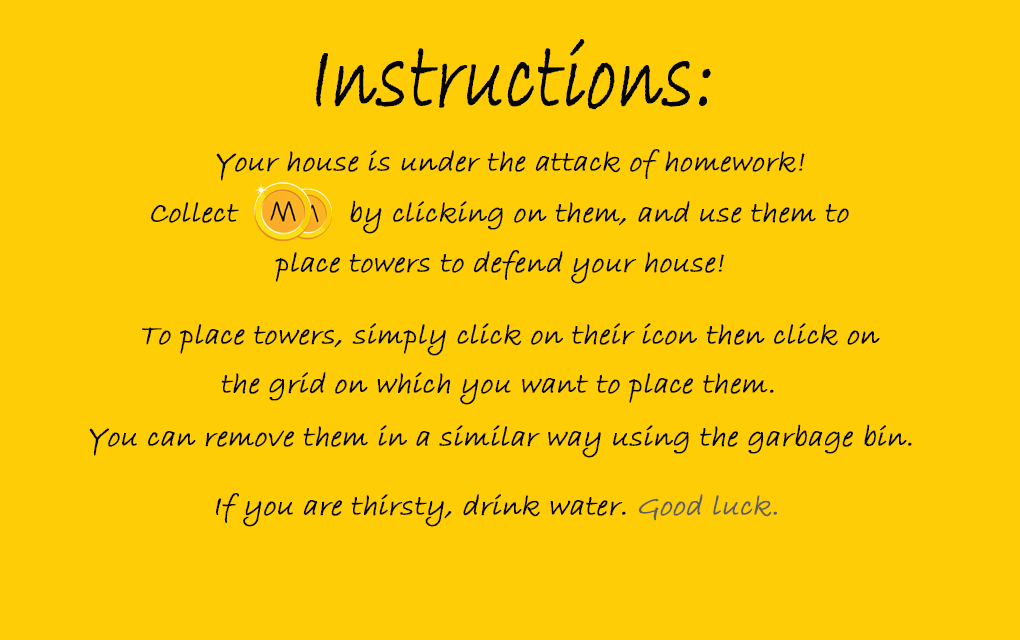
<style>
.page{position:relative;width:1020px;height:640px;background:#ffcd06}
.page>*{position:absolute;margin:0}
.t1{font:98.2px "BradleyHandITC";color:#040404;font-weight:bold;font-style:italic;scale:0.71 1}
.t2{font:30px "BradleyHandITC";color:#040404;font-weight:bold;font-style:italic}
.t3{font:30px "BradleyHandITC";color:#5d5d5d;font-weight:bold;font-style:italic}
</style>
<div class="page">
<p class="t1" style="left:316px;top:39px;width:395px;height:71px">Instructions:</p>
<p class="t2" style="left:216px;top:149px;width:589px;height:32px">Your house is under the attack of homework!</p>
<p class="t2" style="left:151px;top:200px;width:698px;height:34px">Collect             by clicking on them, and use them to</p>
<p class="t2" style="left:275px;top:250px;width:449px;height:34px">place towers to defend your house!</p>
<p class="t2" style="left:142px;top:323px;width:738px;height:33px">To place towers, simply click on their icon then click on</p>
<p class="t2" style="left:221px;top:372px;width:553px;height:33px">the grid on which you want to place them.</p>
<p class="t2" style="left:89px;top:424px;width:823px;height:34px">You can remove them in a similar way using the garbage bin.</p>
<p class="t2" style="left:216px;top:493px;width:561px;height:34px">If you are thirsty, drink water. <span class="t3">Good luck.</span></p>
</div>
